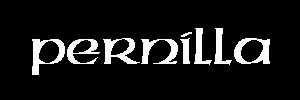
<style>
.page{position:relative;width:300px;height:100px;background:#000000}
.page>*{position:absolute;margin:0}
.t1{font:53.3px "Herald";color:#fcfbfb}
</style>
<div class="page">
<p class="t1" style="left:32px;top:28px;width:238px;height:47px">pernilla</p>
</div>
